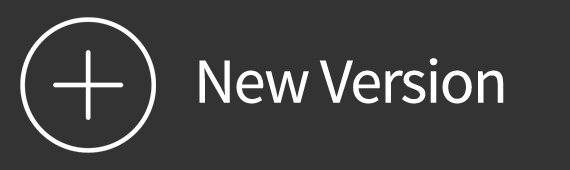
<style>
.page{position:relative;width:570px;height:170px;background:#333333}
.page>*{position:absolute;margin:0}
.t1{font:64px "SourceSansPro-Regular";letter-spacing:-0.025em;color:#ffffff}
</style>
<div class="page">
<p class="t1" style="left:199px;top:58px;width:305px;height:46px">New Version</p>
</div>
